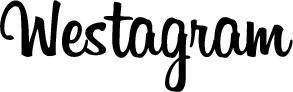
<style>
.page{position:relative;width:293px;height:92px;background:#ffffff}
.page>*{position:absolute;margin:0}
.t1{font:87.1px "Billabong";color:#000000}
</style>
<div class="page">
<p class="t1" style="left:0px;top:0px;width:293px;height:92px">Westagram</p>
</div>
